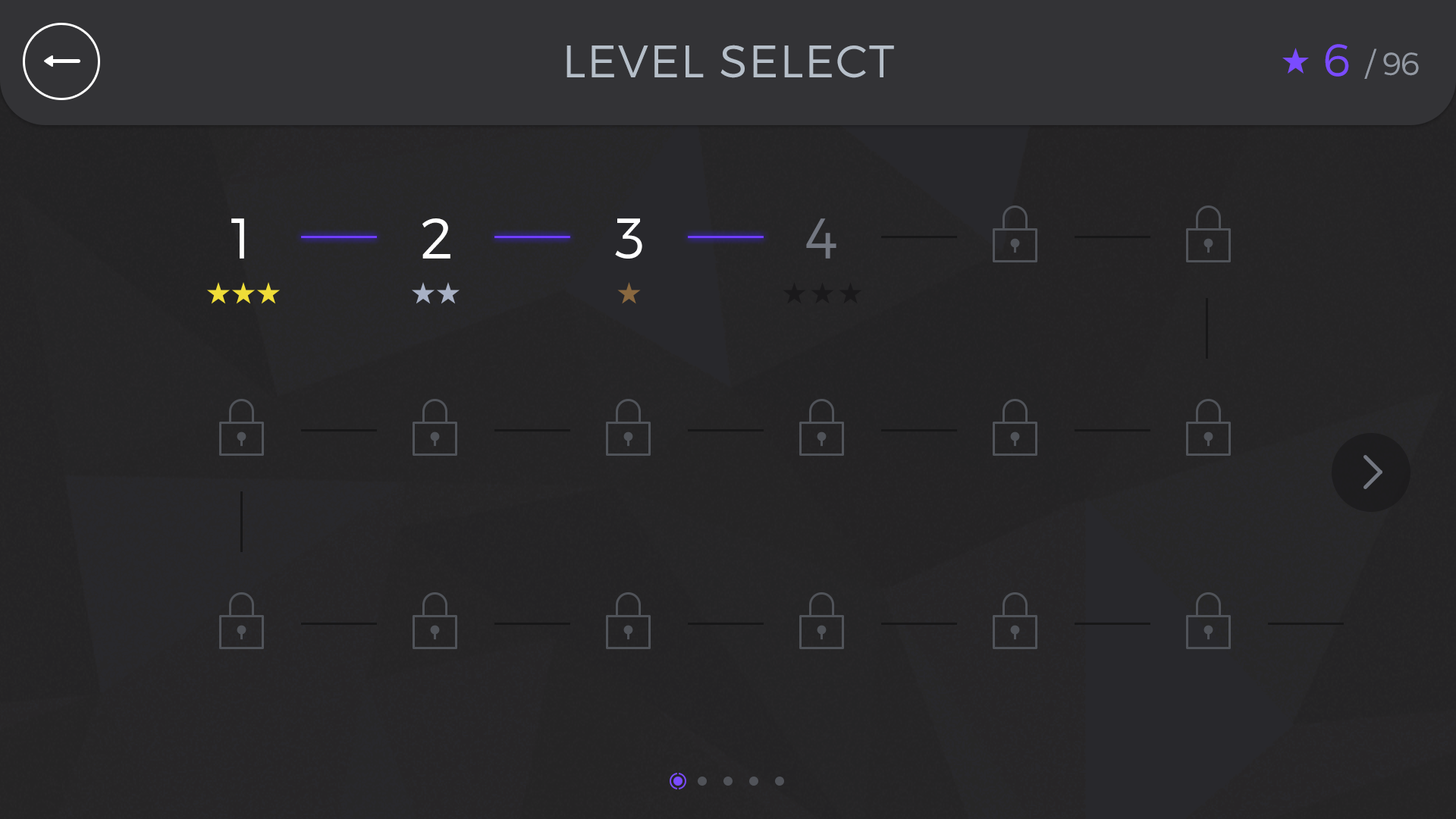
<style>
.page{position:relative;width:1456px;height:819px}
.page>*{position:absolute;margin:0}
.t1{font:45.5px "Montserrat-Light";letter-spacing:0.03em;color:#b6bfc9;text-transform:uppercase}
.t2{font:45.5px "Montserrat-Light";letter-spacing:-0.025em;color:#7a4bff;text-transform:uppercase}
.t3{font:31.8px "Montserrat-Light";letter-spacing:-0.025em;color:#9399a3;text-transform:uppercase}
.t4{font:56.9px "Montserrat-Light";letter-spacing:-0.025em;color:#ffffff;text-transform:uppercase}
.t5{font:56.9px "Montserrat-Light";letter-spacing:-0.025em;color:#737781;text-transform:uppercase}
</style>
<div class="page">
<p class="t1" style="left:566px;top:45px;width:328px;height:33px">Level Select</p>
<p class="t2" style="left:1325px;top:44px;width:24px;height:33px">6</p>
<p class="t3" style="left:1364px;top:49px;width:55px;height:30px">/ 96</p>
<p class="t4" style="left:231px;top:218px;width:13px;height:41px">1</p>
<p class="t4" style="left:422px;top:218px;width:28px;height:41px">2</p>
<p class="t4" style="left:615px;top:218px;width:27px;height:41px">3</p>
<p class="t5" style="left:806px;top:218px;width:30px;height:41px">4</p>
</div>
